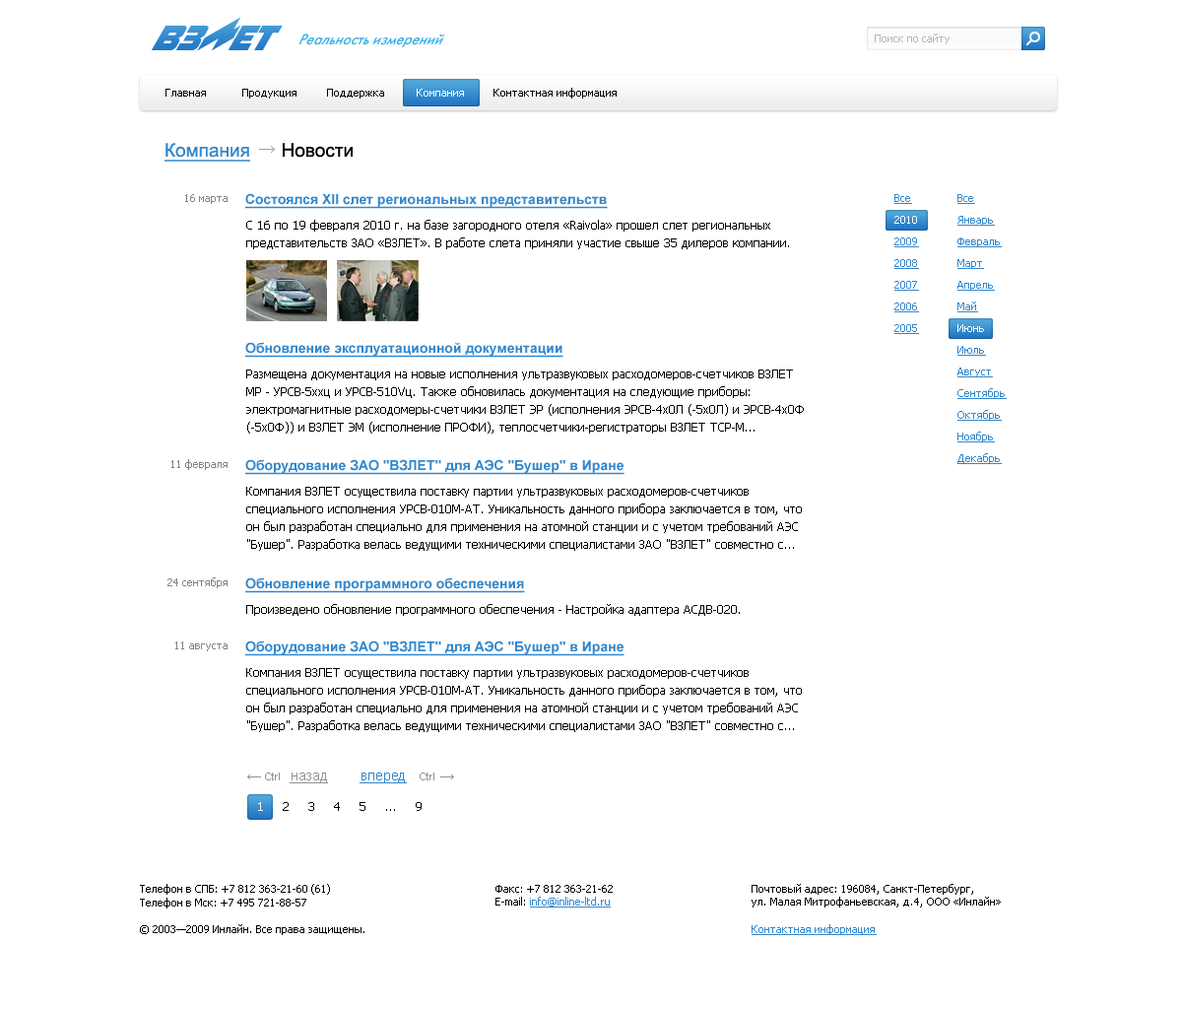
<style>
.page{position:relative;width:1182px;height:1009px;background:#ffffff}
.page>*{position:absolute;margin:0}
.t1{font:15.7px "FuturisC-Italic";color:#3cb3e8;scale:0.94 1}
.t2{font:10.8px "Tahoma";color:#b7b6b6}
.t3{font:10.8px "Tahoma";color:#000000}
.t4{font:10.8px "Tahoma";color:#ffffff}
.t5{font:18.7px "ArialMT";color:#3287cc;text-decoration:underline}
.t6{font:18.7px "ArialMT";color:#000000}
.t7{font:10.8px "Tahoma";color:#838383}
.t8{font:13.8px "Arial-BoldMT";color:#3287cc;text-decoration:underline}
.t9{font:10.8px/21.7px "Tahoma";color:#3287cc;text-decoration:underline}
.t10{font:10.8px/21.7px "Tahoma";color:#ffffff}
.t11{font:11.8px/17.7px "Tahoma";color:#000000}
.t12{font:11.8px "Tahoma";color:#000000}
.t13{font:10.8px "ArialMT";color:#929292}
.t14{font:13.8px "ArialMT";color:#929292;text-decoration:underline}
.t15{font:13.8px "ArialMT";color:#3287cc;text-decoration:underline}
.t16{font:11.8px "Tahoma";color:#ffffff}
.t17{font:14.8px "Arial-BoldMT";color:#000000}
.t18{font:10.8px "Tahoma";color:#3287cc;text-decoration:underline}
</style>
<div class="page">
<p class="t1" style="left:298px;top:33px;width:147px;height:14px">Реальность измерений</p>
<p class="t2" style="left:875px;top:33px;width:75px;height:11px">Поиск по сайту</p>
<p class="t3" style="left:165px;top:89px;width:41px;height:8px">Главная</p>
<p class="t3" style="left:242px;top:89px;width:55px;height:10px">Продукция</p>
<p class="t3" style="left:327px;top:89px;width:57px;height:10px">Поддержка</p>
<p class="t4" style="left:417px;top:89px;width:47px;height:8px">Компания</p>
<p class="t3" style="left:494px;top:88px;width:123px;height:11px">Контактная информация</p>
<p class="t5" style="left:165px;top:143px;width:188px;height:19px">Компания<span class="t6">      Новости</span></p>
<p class="t7" style="left:185px;top:194px;width:43px;height:10px">16 марта</p>
<p class="t8" style="left:245px;top:193px;width:363px;height:16px">Состоялся XII слет региональных представительств</p>
<p class="t9" style="left:894px;top:194px;width:25px;height:140px">Все<br><span class="t10">2010<br></span>2009<br>2008<br>2007<br>2006<br>2005</p>
<p class="t9" style="left:958px;top:194px;width:49px;height:270px">Все<br>Январь<br>Февраль<br>Март<br>Апрель<br>Май<br><span class="t10">Июнь<br></span>Июль<br>Август<br>Сентябрь<br>Октябрь<br>Ноябрь<br>Декабрь</p>
<p class="t11" style="left:246px;top:220px;width:543px;height:29px">С 16 по 19 февраля 2010 г. на базе загородного отеля «Raivola» прошел слет региональных представительств ЗАО «ВЗЛЕТ». В работе слета приняли участие свыше 35 дилеров компании.</p>
<p class="t8" style="left:245px;top:342px;width:318px;height:16px">Обновление эксплуатационной документации</p>
<p class="t11" style="left:246px;top:369px;width:558px;height:64px">Размещена документация на новые исполнения ультразвуковых расходомеров-счетчиков ВЗЛЕТ МР - УРСВ-5ххц и УРСВ-510Vц. Также обновилась документация на следующие приборы: электромагнитные расходомеры-счетчики ВЗЛЕТ ЭР (исполнения ЭРСВ-4х0Л (-5х0Л) и ЭРСВ-4х0Ф (-5х0Ф)) и ВЗЛЕТ ЭМ (исполнение ПРОФИ), теплосчетчики-регистраторы ВЗЛЕТ ТСР-М...</p>
<p class="t7" style="left:171px;top:459px;width:57px;height:11px">11 февраля</p>
<p class="t8" style="left:245px;top:459px;width:380px;height:16px">Оборудование ЗАО "ВЗЛЕТ" для АЭС "Бушер" в Иране</p>
<p class="t11" style="left:246px;top:487px;width:556px;height:64px">Компания ВЗЛЕТ осуществила поставку партии ультразвуковых расходомеров-счетчиков специального исполнения УРСВ-010М-АТ. Уникальность данного прибора заключается в том, что он был разработан специально для применения на атомной станции и с учетом требований АЭС "Бушер". Разработка велась ведущими техническими специалистами ЗАО "ВЗЛЕТ" совместно с...</p>
<p class="t7" style="left:167px;top:577px;width:61px;height:11px">24 сентября</p>
<p class="t8" style="left:245px;top:577px;width:280px;height:16px">Обновление программного обеспечения</p>
<p class="t12" style="left:246px;top:604px;width:494px;height:12px">Произведено обновление программного обеспечения - Настройка адаптера АСДВ-020.</p>
<p class="t7" style="left:175px;top:641px;width:53px;height:10px">11 августа</p>
<p class="t8" style="left:245px;top:640px;width:380px;height:16px">Оборудование ЗАО "ВЗЛЕТ" для АЭС "Бушер" в Иране</p>
<p class="t11" style="left:246px;top:668px;width:556px;height:64px">Компания ВЗЛЕТ осуществила поставку партии ультразвуковых расходомеров-счетчиков специального исполнения УРСВ-010М-АТ. Уникальность данного прибора заключается в том, что он был разработан специально для применения на атомной станции и с учетом требований АЭС "Бушер". Разработка велась ведущими техническими специалистами ЗАО "ВЗЛЕТ" совместно с...</p>
<p class="t13" style="left:265px;top:772px;width:15px;height:8px">Ctrl</p>
<p class="t14" style="left:290px;top:772px;width:38px;height:11px">назад</p>
<p class="t15" style="left:360px;top:772px;width:47px;height:11px">вперед</p>
<p class="t13" style="left:420px;top:772px;width:14px;height:8px">Ctrl</p>
<p class="t16" style="left:258px;top:802px;width:5px;height:9px">1</p>
<p class="t12" style="left:283px;top:802px;width:6px;height:9px">2</p>
<p class="t12" style="left:308px;top:802px;width:6px;height:9px">3</p>
<p class="t12" style="left:334px;top:802px;width:6px;height:9px">4</p>
<p class="t12" style="left:360px;top:802px;width:5px;height:9px">5</p>
<p class="t12" style="left:386px;top:809px;width:9px;height:2px">...</p>
<p class="t12" style="left:416px;top:802px;width:6px;height:9px">9</p>
<p class="t3" style="left:140px;top:884px;width:190px;height:24px">Телефон в СПБ: +7 812 363-21-60 (61)<br>Телефон в Мск: +7 495 721-88-57</p>
<p class="t3" style="left:496px;top:885px;width:117px;height:22px"><span class="t17"><br><br></span>Факс: +7 812 363-21-62<br>E-mail: <span class="t18">info@inline-ltd.ru</span></p>
<p class="t3" style="left:752px;top:884px;width:249px;height:23px"><span class="t17"><br><br></span>Почтовый адрес: 196084, Санкт-Петербург,<br>ул. Малая Митрофаньевская, д.4, ООО «Инлайн»</p>
<p class="t3" style="left:140px;top:924px;width:224px;height:11px">© 2003—2009 Инлайн. Все права защищены.</p>
<p class="t18" style="left:752px;top:924px;width:125px;height:11px">Контактная информация</p>
</div>
